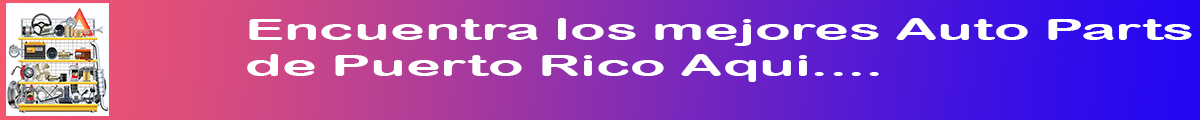
<style>
.page{position:relative;width:1200px;height:120px}
.page>*{position:absolute;margin:0}
.t1{font:30px "ArialRoundedMTBold";color:#ffffff;scale:1.95 1}
</style>
<div class="page">
<p class="t1" style="left:247px;top:18px;width:945px;height:64px">Encuentra los mejores Auto Parts <br>de Puerto Rico Aqui....</p>
</div>
